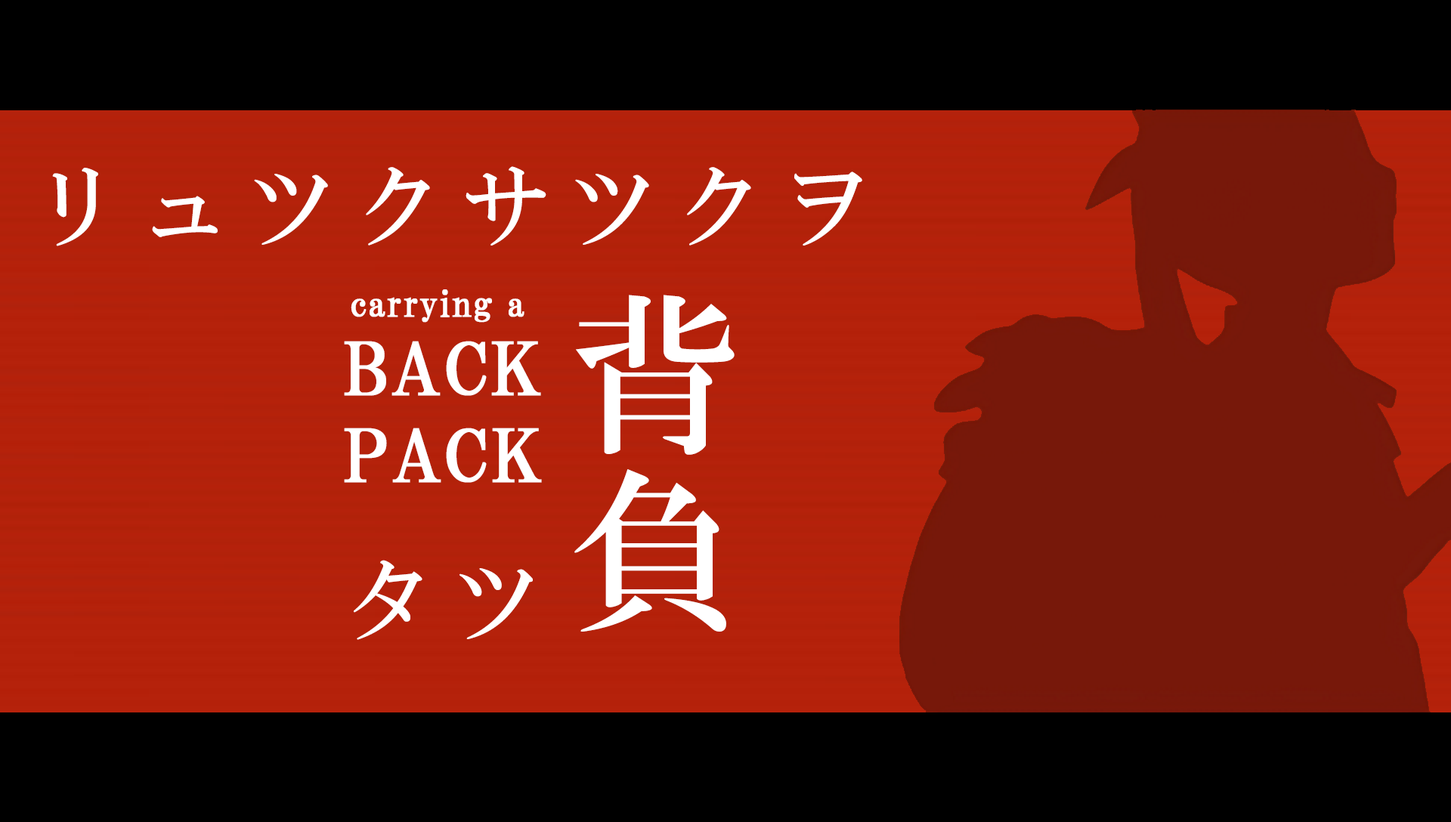
<style>
.page{position:relative;width:1451px;height:822px;background:#000000}
.page>*{position:absolute;margin:0}
.t1{font:89.9px "HGMinchoB";letter-spacing:0.19em;color:#ffffff}
.t2{font:36.3px "HGPMinchoB";letter-spacing:0.01em;color:#ffffff;font-weight:bold}
.t3{font:173.8px/201px "HGMinchoB";letter-spacing:0.01em;color:#ffffff}
.t4{font:72.5px "HGPMinchoB";letter-spacing:0.01em;color:#ffffff;text-transform:uppercase;font-weight:bold}
</style>
<div class="page">
<p class="t1" style="left:52px;top:166px;width:810px;height:80px">リュツクサツクヲ</p>
<p class="t2" style="left:351px;top:289px;width:173px;height:34px">carrying a</p>
<p class="t3" style="left:574px;top:295px;width:160px;height:337px">背負</p>
<p class="t4" style="left:344px;top:341px;width:198px;height:142px">back<br>pack</p>
<p class="t1" style="left:354px;top:560px;width:179px;height:80px">タツ</p>
</div>
